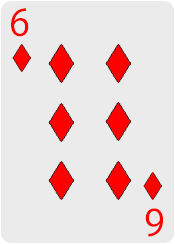
<style>
.page{position:relative;width:175px;height:244px;background:#ebebeb}
.page>*{position:absolute;margin:0}
.t1{font:36px "KozGoPr6N-Regular";color:#ff0000}
</style>
<div class="page">
<p class="t1" style="left:11px;top:8px;width:18px;height:29px">6</p>
<p class="t1" style="left:145px;top:208px;width:18px;height:29px;rotate:-180deg">6</p>
</div>
